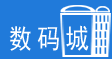
<style>
.page{position:relative;width:112px;height:59px;background:#207ada}
.page>*{position:absolute;margin:0}
.t1{font:27.3px "SimHei";letter-spacing:0.2em;color:#ffffff;scale:0.86 1}
</style>
<div class="page">
<p class="t1" style="left:9px;top:25px;width:80px;height:26px">数码城</p>
</div>
